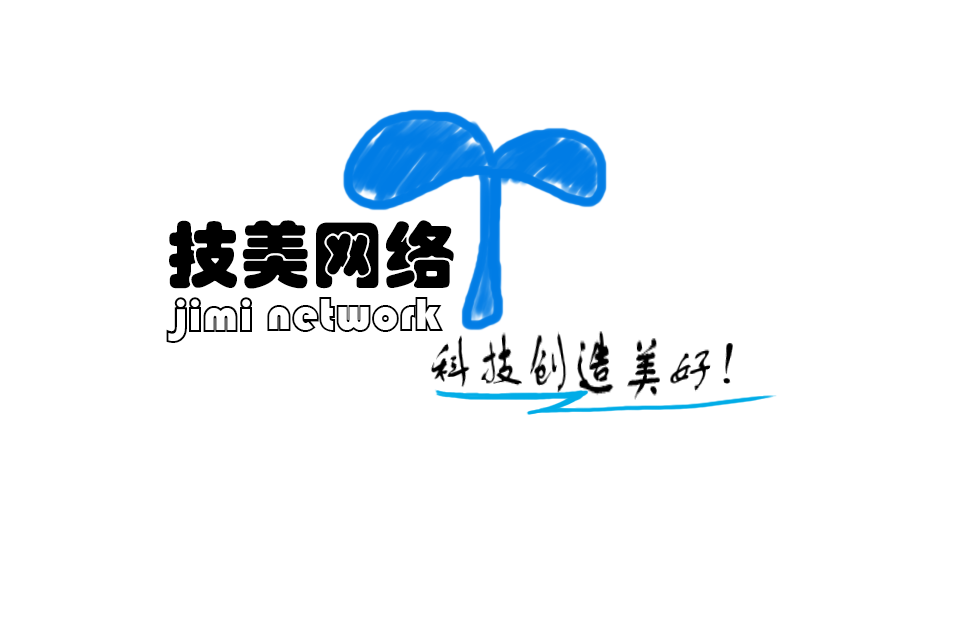
<style>
.page{position:relative;width:960px;height:640px;background:#ffffff}
.page>*{position:absolute;margin:0}
.t1{font:72px "STHupo";color:#000000}
.t2{font:48px "STCaiyun";color:#000000}
</style>
<div class="page">
<p class="t1" style="left:169px;top:220px;width:285px;height:69px">技美网络</p>
<p class="t2" style="left:166px;top:297px;width:86px;height:46px">jimi</p>
<p class="t2" style="left:267px;top:297px;width:176px;height:35px">network</p>
</div>
